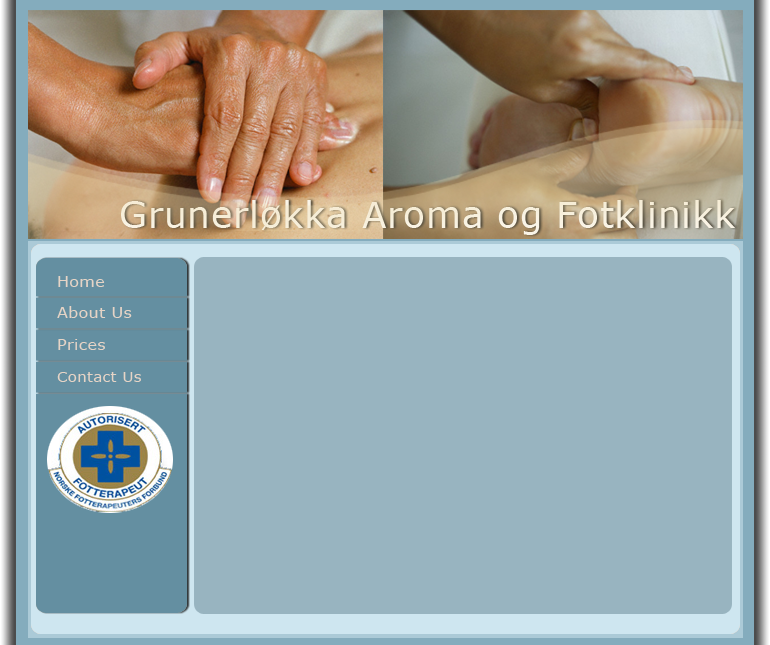
<style>
.page{position:relative;width:770px;height:645px;background:#98b4c0}
.page>*{position:absolute;margin:0}
.t1{font:36px "Verdana";letter-spacing:0.02em;color:#f7efdb}
.t2{font:15.1px "Verdana";letter-spacing:0.02em;color:#e6d4c6;scale:1.06 1}
.t3{font:14.1px "Verdana";letter-spacing:0.02em;color:#e6d4c6;scale:1.06 1}
</style>
<div class="page">
<p class="t1" style="left:121px;top:200px;width:614px;height:35px">Grunerløkka Aroma og Fotklinikk</p>
<p class="t2" style="left:58px;top:276px;width:47px;height:11px">Home</p>
<p class="t2" style="left:57px;top:306px;width:75px;height:12px">About Us</p>
<p class="t2" style="left:58px;top:339px;width:47px;height:11px">Prices</p>
<p class="t3" style="left:57px;top:372px;width:84px;height:10px">Contact Us</p>
</div>
